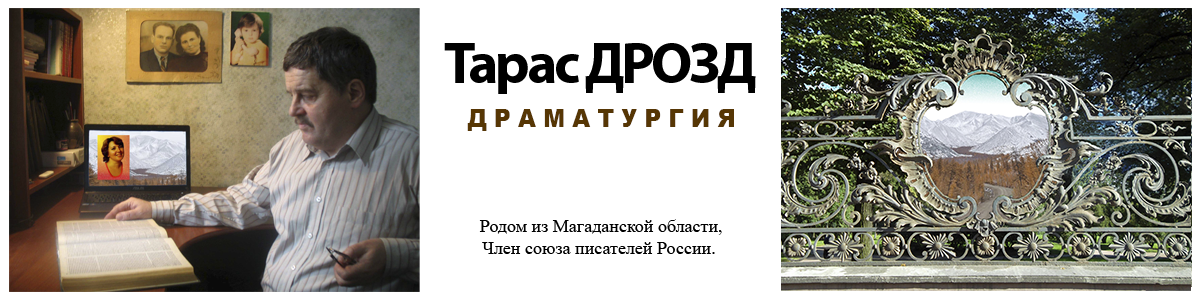
<style>
.page{position:relative;width:1200px;height:300px;background:#ffffff}
.page>*{position:absolute;margin:0}
.t1{font:58px "MyriadPro-Bold";letter-spacing:-0.06em;color:#000000}
.t2{font:25.1px "Arial-Black";letter-spacing:0.32em;color:#563604;text-transform:uppercase;scale:0.92 1}
.t3{font:18px "TimesNewRomanPSMT";color:#000000}
</style>
<div class="page">
<p class="t1" style="left:444px;top:43px;width:312px;height:51px">Тарас ДРОЗД</p>
<p class="t2" style="left:467px;top:109px;width:267px;height:22px">драматургия</p>
<p class="t3" style="left:479px;top:219px;width:243px;height:35px;text-align:center">Родом из Магаданской области,<br>Член союза писателей России.</p>
</div>
